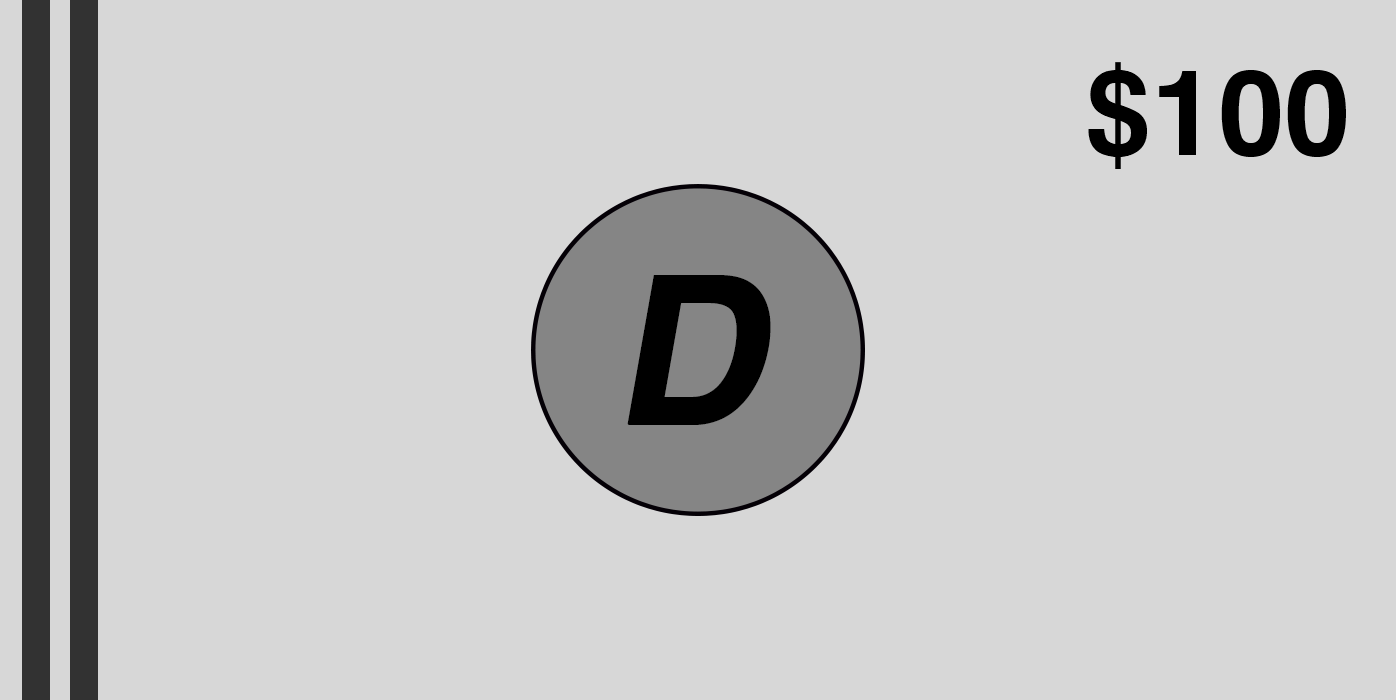
<style>
.page{position:relative;width:1396px;height:700px;background:#d7d7d7}
.page>*{position:absolute;margin:0}
.t1{font:119.1px "Helvetica-Bold";color:#000000}
.t2{font:205.9px "Helvetica-Bold";color:#000000;font-weight:bold;font-style:italic}
</style>
<div class="page">
<p class="t1" style="left:1088px;top:62px;width:258px;height:107px">$100</p>
<p class="t2" style="left:627px;top:275px;width:144px;height:150px">D</p>
</div>
